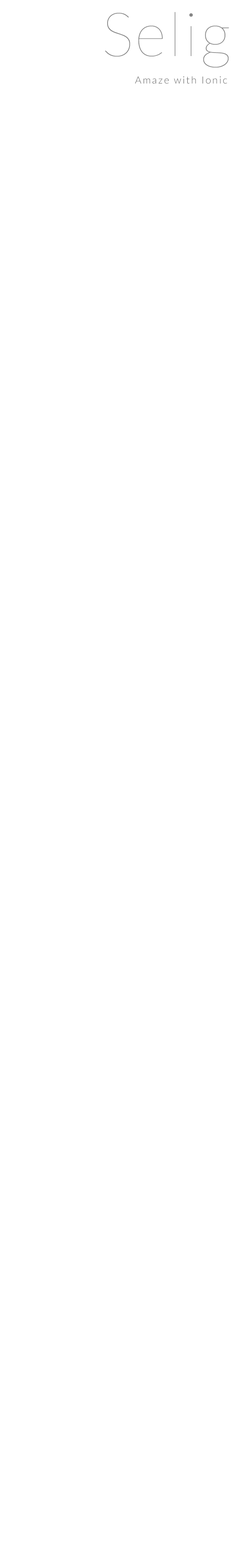
<style>
.page{position:relative;width:241px;height:1568px;background:#ffffff}
.page>*{position:absolute;margin:0}
.t1{font:61px "Lato-Hairline";letter-spacing:0.04em;color:#868686}
.t2{font:9.9px "Lato-Light";letter-spacing:0.14em;color:#5d5d5d}
</style>
<div class="page">
<p class="t1" style="left:105px;top:12px;width:125px;height:56px">Selig</p>
<p class="t2" style="left:135px;top:76px;width:93px;height:8px">Amaze with Ionic</p>
</div>
